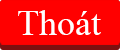
<style>
.page{position:relative;width:120px;height:50px;background:#ff0000}
.page>*{position:absolute;margin:0}
.t1{font:36px "TimesNewRomanPSMT";color:#fefefe}
</style>
<div class="page">
<p class="t1" style="left:18px;top:10px;width:83px;height:25px">Thoát</p>
</div>
